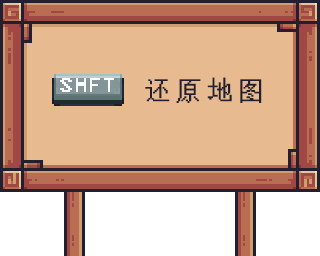
<style>
.page{position:relative;width:320px;height:256px;background:#e7bb8f}
.page>*{position:absolute;margin:0}
.t1{font:25px "FZXS16--GB1-0";letter-spacing:0.22em;color:#211f30;font-weight:bold}
</style>
<div class="page">
<p class="t1" style="left:145px;top:77px;width:117px;height:26px">还原地图</p>
</div>
